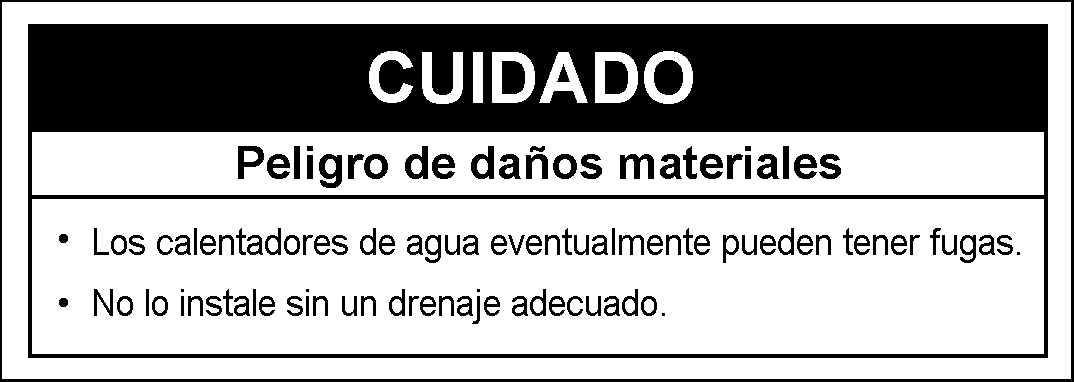
<style>
.page{position:relative;width:1074px;height:382px;background:#ffffff}
.page>*{position:absolute;margin:0}
.t1{font:70.8px "Arial-BoldMT";color:#fefefe}
.t2{font:45.8px "Arial-BoldMT";color:#010101}
.t3{font:37.5px "ArialMT";color:#010101;scale:0.93 1}
.t4{font:37.5px "ArialMT";color:#010101}
</style>
<div class="page">
<p class="t1" style="left:369px;top:51px;width:324px;height:53px">CUIDADO</p>
<p class="t2" style="left:238px;top:146px;width:603px;height:42px">Peligro de daños materiales</p>
<p class="t3" style="left:94px;top:228px;width:926px;height:96px;text-align:justify">Los calentadores de agua eventualmente pueden tener fugas.<br>No lo instale sin un drenaje adecuado.</p>
<p class="t4" style="left:59px;top:234px;width:9px;height:9px">•</p>
<p class="t4" style="left:59px;top:298px;width:9px;height:9px">•</p>
</div>
